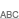
<style>
.page{position:relative;width:19px;height:19px;background:#ffffff}
.page>*{position:absolute;margin:0}
.t1{font:9px "ArialMT";color:#707070}
</style>
<div class="page">
<p class="t1" style="left:0px;top:11px;width:19px;height:7px">ABC</p>
</div>
